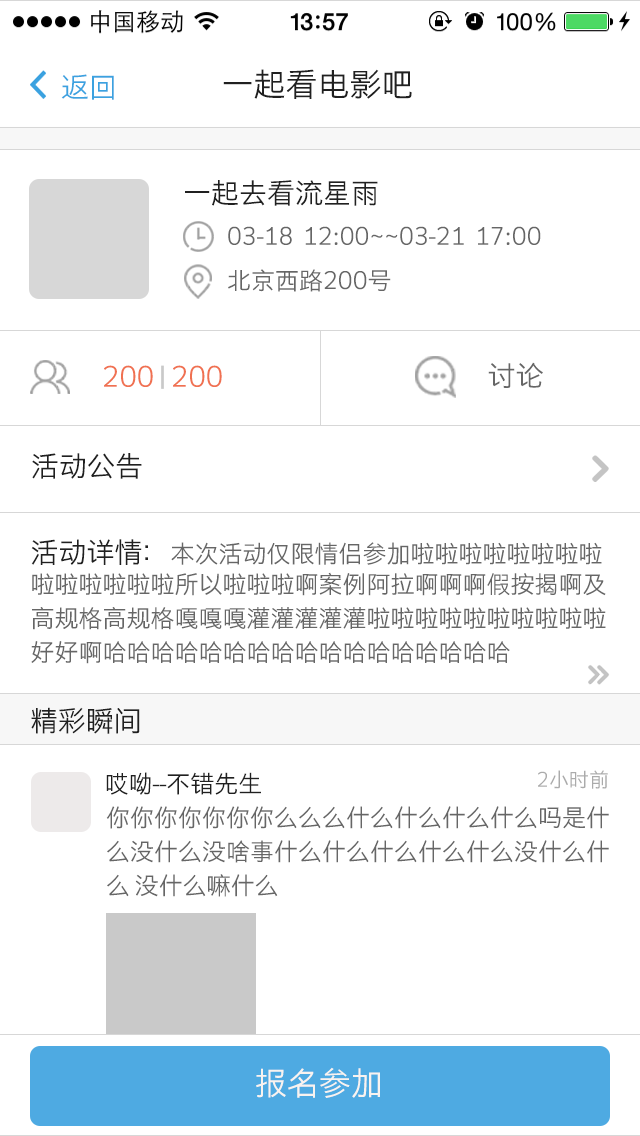
<style>
.page{position:relative;width:640px;height:1136px;background:#ffffff}
.page>*{position:absolute;margin:0}
.t1{font:28px "STHeitiSC-Light";color:#3ba2e0}
.t2{font:32px "STHeitiSC-Light";color:#202020}
.t3{font:28px "STHeitiSC-Light";color:#202020}
.t4{font:24px "STHeitiSC-Light";color:#666666}
.t5{font:28px "STHeitiSC-Light";color:#f07151}
.t6{font:22.9px "STHeitiSC-Light";color:#c9c9c9;scale:0.88 1}
.t7{font:28px "STHeitiSC-Light";color:#666666}
.t8{font:24px/34px "STHeitiSC-Light";color:#666666}
.t9{font:28px/34px "STHeitiSC-Light";color:#202020}
.t10{font:24px "STHeitiSC-Light";color:#202020}
.t11{font:20px "STHeitiSC-Light";color:#ababab}
.t12{font:32px "STHeitiSC-Light";color:#f8f3f0}
</style>
<div class="page">
<p class="t1" style="left:61px;top:74px;width:53px;height:26px">返回</p>
<p class="t2" style="left:223px;top:69px;width:189px;height:30px">一起看电影吧</p>
<p class="t3" style="left:185px;top:180px;width:193px;height:26px">一起去看流星雨</p>
<p class="t4" style="left:228px;top:226px;width:313px;height:19px">03-18  12:00~~03-21  17:00</p>
<p class="t4" style="left:228px;top:269px;width:163px;height:23px">北京西路200号</p>
<p class="t5" style="left:104px;top:365px;width:118px;height:22px">200   200</p>
<p class="t6" style="left:161px;top:365px;width:3px;height:24px">▏</p>
<p class="t7" style="left:488px;top:362px;width:55px;height:26px">讨论</p>
<p class="t3" style="left:32px;top:453px;width:110px;height:26px">活动公告</p>
<p class="t8" style="left:31px;top:539px;width:575px;height:125px"><span class="t9">活动详情：</span>本次活动仅限情侣参加啦啦啦啦啦啦啦啦<br>啦啦啦啦啦啦所以啦啦啦啊案例阿拉啊啊啊假按揭啊及<br>高规格高规格嘎嘎嘎灌灌灌灌灌啦啦啦啦啦啦啦啦啦啦<br>好好啊哈哈哈哈哈哈哈哈哈哈哈哈哈哈哈哈哈</p>
<p class="t3" style="left:31px;top:707px;width:109px;height:27px">精彩瞬间</p>
<p class="t10" style="left:106px;top:772px;width:155px;height:23px">哎呦--不错先生</p>
<p class="t11" style="left:538px;top:770px;width:70px;height:19px">2小时前</p>
<p class="t8" style="left:106px;top:806px;width:503px;height:91px">你你你你你你你么么么什么什么什么什么吗是什么没什么没啥事什么什么什么什么什么没什么什么 没什么嘛什么</p>
<p class="t12" style="left:256px;top:1067px;width:124px;height:31px">报名参加</p>
</div>
